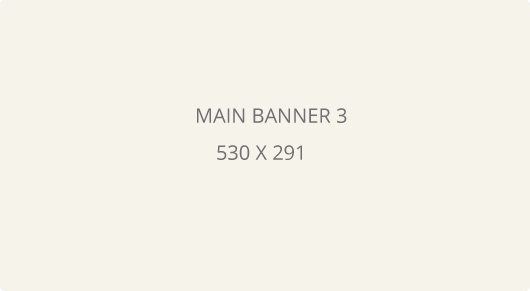
<style>
.page{position:relative;width:530px;height:291px;background:#f6f3eb}
.page>*{position:absolute;margin:0}
.t1{font:20px "OpenSans";color:#707070}
</style>
<div class="page">
<p class="t1" style="left:197px;top:108px;width:150px;height:15px">MAIN BANNER 3</p>
<p class="t1" style="left:217px;top:145px;width:85px;height:15px">530 X 291</p>
</div>
